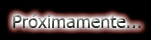
<style>
.page{position:relative;width:151px;height:40px;background:#000000}
.page>*{position:absolute;margin:0}
.t1{font:18px "Tahoma"}
</style>
<div class="page">
<p class="t1" style="left:13px;top:14px;width:128px;height:14px">Próximamente...</p>
</div>
